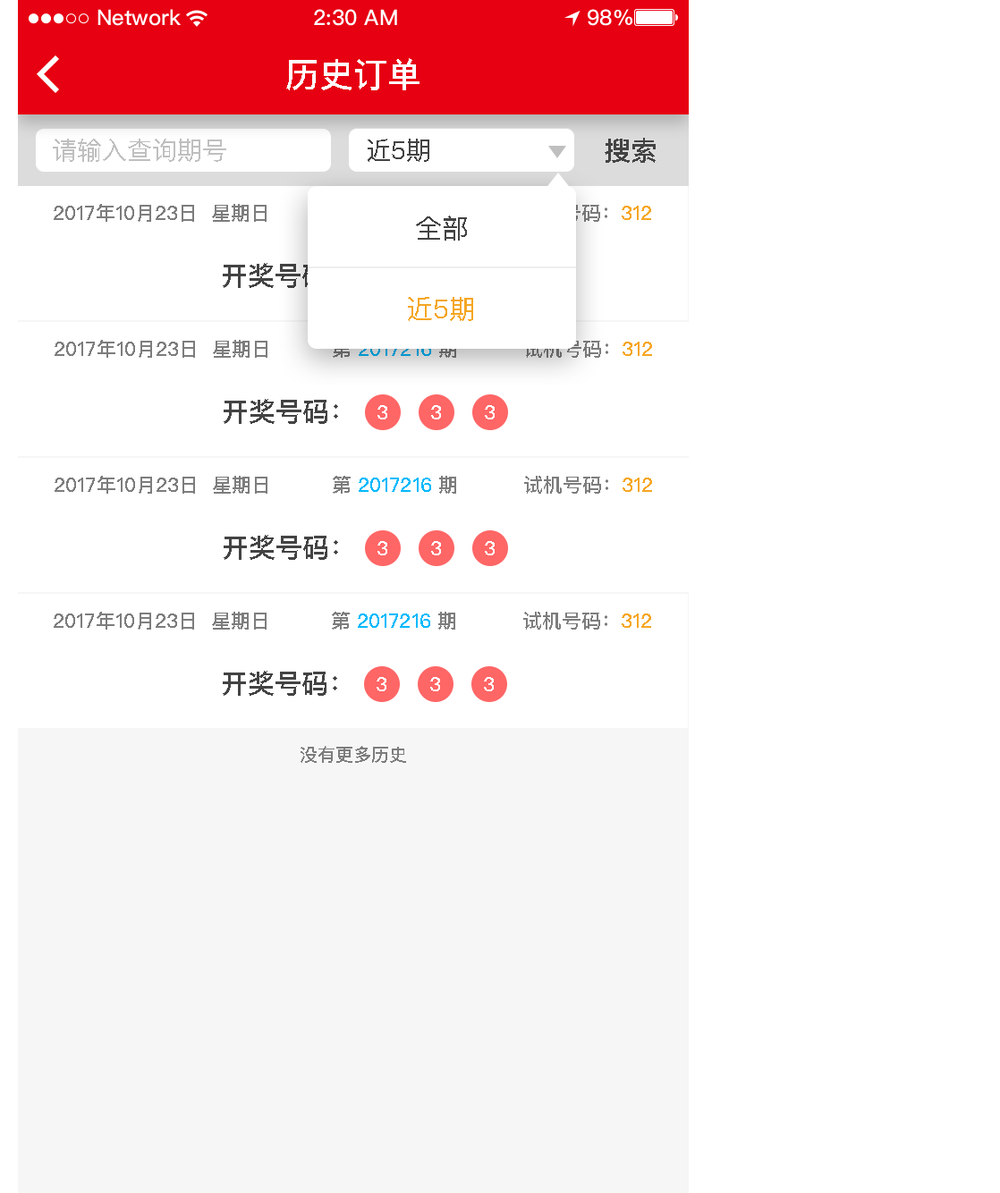
<style>
.page{position:relative;width:1000px;height:1193px;background:#ffffff}
.page>*{position:absolute;margin:0}
.t1{font:34px "PingFangSC-Medium";color:#ffffff;text-transform:uppercase}
.t2{font:26.8px "PingFangSC-Medium";color:#434343;text-transform:uppercase}
.t3{font:25px "PingFangSC-Regular";color:#bfbfbf;text-transform:uppercase}
.t4{font:25px "PingFangSC-Regular";color:#434343;text-transform:uppercase}
.t5{font:19.7px "PingFangSC-Medium";color:#7d7d7d;text-transform:uppercase}
.t6{font:19.7px "PingFangSC-Medium";text-transform:uppercase}
.t7{font:26.8px "PingFangSC-Regular";color:#434343;text-transform:uppercase}
.t8{font:26.8px "PingFangSC-Regular";color:#f5a623;text-transform:uppercase}
.t9{font:19.7px "PingFangSC-Medium";color:#f6a623;text-transform:uppercase}
.t10{font:19.7px "PingFangSC-Medium";color:#ffffff;text-transform:uppercase}
.t11{font:19.7px "PingFangSC-Medium";color:#01b9fd;text-transform:uppercase}
.t12{font:17.9px "PingFangSC-Medium";color:#7d7d7d;text-transform:uppercase}
</style>
<div class="page">
<p class="t1" style="left:286px;top:58px;width:133px;height:32px">历史订单</p>
<p class="t2" style="left:604px;top:138px;width:51px;height:25px">搜索</p>
<p class="t3" style="left:53px;top:139px;width:173px;height:23px">请输入查询期号</p>
<p class="t4" style="left:368px;top:139px;width:61px;height:23px">近5期</p>
<p class="t5" style="left:54px;top:204px;width:212px;height:18px">2017年10月23日  星期日</p>
<p class="t6" style="left:523px;top:204px;width:128px;height:18px">试机号码：312</p>
<p class="t7" style="left:416px;top:215px;width:51px;height:26px">全部</p>
<p class="t2" style="left:223px;top:263px;width:114px;height:25px">开奖号码：</p>
<p class="t8" style="left:408px;top:297px;width:65px;height:24px">近5期</p>
<p class="t5" style="left:55px;top:340px;width:212px;height:18px">2017年10月23日  星期日</p>
<p class="t6" style="left:333px;top:340px;width:123px;height:18px">第 2017216 期</p>
<p class="t5" style="left:524px;top:340px;width:128px;height:18px">试机号码：<span class="t9">312</span></p>
<p class="t2" style="left:224px;top:399px;width:114px;height:25px">开奖号码：</p>
<p class="t10" style="left:377px;top:405px;width:10px;height:14px">3</p>
<p class="t10" style="left:431px;top:405px;width:10px;height:14px">3</p>
<p class="t10" style="left:485px;top:405px;width:9px;height:14px">3</p>
<p class="t5" style="left:55px;top:476px;width:212px;height:18px">2017年10月23日  星期日</p>
<p class="t11" style="left:333px;top:476px;width:123px;height:18px"><span class="t5">第 </span>2017216 <span class="t5">期</span></p>
<p class="t5" style="left:524px;top:476px;width:128px;height:18px">试机号码：<span class="t9">312</span></p>
<p class="t2" style="left:224px;top:535px;width:114px;height:25px">开奖号码：</p>
<p class="t10" style="left:377px;top:541px;width:10px;height:14px">3</p>
<p class="t10" style="left:431px;top:541px;width:10px;height:14px">3</p>
<p class="t10" style="left:485px;top:541px;width:9px;height:14px">3</p>
<p class="t5" style="left:54px;top:612px;width:212px;height:17px">2017年10月23日  星期日</p>
<p class="t11" style="left:332px;top:612px;width:123px;height:17px"><span class="t5">第 </span>2017216 <span class="t5">期</span></p>
<p class="t5" style="left:523px;top:612px;width:128px;height:17px">试机号码：<span class="t9">312</span></p>
<p class="t2" style="left:223px;top:671px;width:114px;height:25px">开奖号码：</p>
<p class="t10" style="left:376px;top:677px;width:10px;height:14px">3</p>
<p class="t10" style="left:430px;top:677px;width:10px;height:14px">3</p>
<p class="t10" style="left:484px;top:677px;width:10px;height:14px">3</p>
<p class="t12" style="left:300px;top:746px;width:106px;height:17px">没有更多历史</p>
</div>
